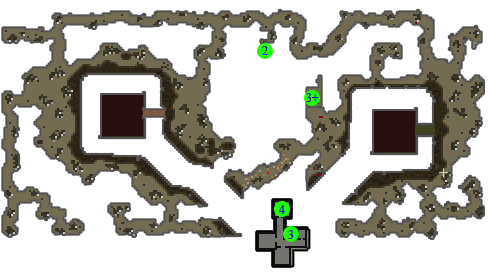
<style>
.page{position:relative;width:488px;height:272px;background:#ffffff}
.page>*{position:absolute;margin:0}
.t1{font:20px "TimesNewRomanPSMT";color:#0101dd}
</style>
<div class="page">
<p class="t1" style="left:262px;top:46px;width:6px;height:9px">2</p>
<p class="t1" style="left:306px;top:93px;width:13px;height:9px">3+</p>
<p class="t1" style="left:279px;top:205px;width:6px;height:9px">4</p>
<p class="t1" style="left:288px;top:230px;width:6px;height:9px">3</p>
</div>
